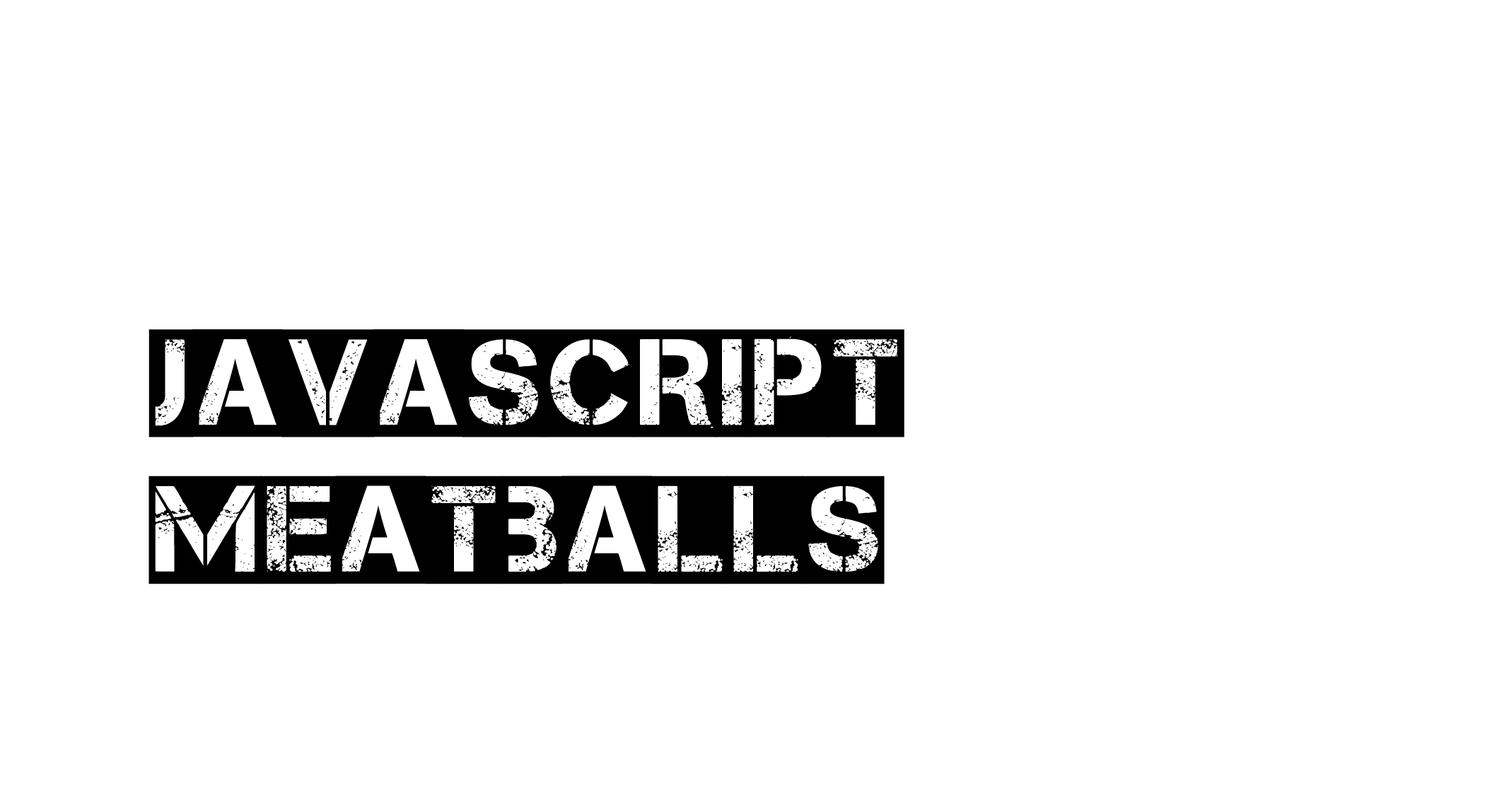
<style>
.page{position:relative;width:1509px;height:790px;background:#ffffff}
.page>*{position:absolute;margin:0}
.t1{font:122.3px "Captureit2";color:#000000}
</style>
<div class="page">
<p class="t1" style="left:148px;top:329px;width:756px;height:256px">JavaScript Meatballs</p>
</div>
